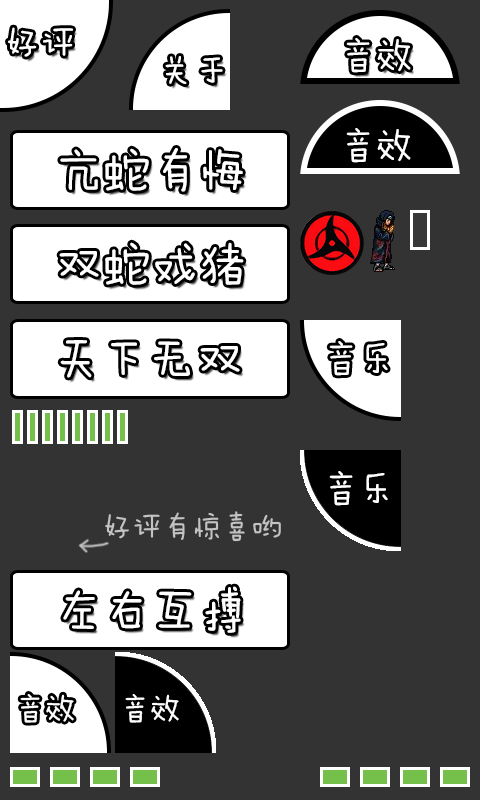
<style>
.page{position:relative;width:480px;height:800px;background:#333333}
.page>*{position:absolute;margin:0}
.t1{font:36px "FZMWJW--GB1-0";color:#ffffff}
.t2{font:48px "FZMWJW--GB1-0";color:#ffffff}
.t3{font:30px "FZMWJW--GB1-0";color:#c3c3c3}
.t4{font:30px "FZMWJW--GB1-0";color:#ffffff}
</style>
<div class="page">
<p class="t1" style="left:8px;top:27px;width:65px;height:30px">好评</p>
<p class="t1" style="left:346px;top:38px;width:65px;height:35px">音效</p>
<p class="t1" style="left:165px;top:56px;width:58px;height:28px">关于</p>
<p class="t1" style="left:346px;top:128px;width:65px;height:35px">音效</p>
<p class="t2" style="left:60px;top:148px;width:183px;height:44px">亢蛇有悔</p>
<p class="t2" style="left:59px;top:242px;width:185px;height:43px">双蛇戏猪</p>
<p class="t1" style="left:329px;top:341px;width:59px;height:35px">音乐</p>
<p class="t1" style="left:329px;top:471px;width:59px;height:35px">音乐</p>
<p class="t3" style="left:105px;top:511px;width:176px;height:31px">好评有惊喜哟</p>
<p class="t4" style="left:20px;top:694px;width:54px;height:29px">音效</p>
<p class="t4" style="left:125px;top:694px;width:54px;height:29px">音效</p>
</div>
